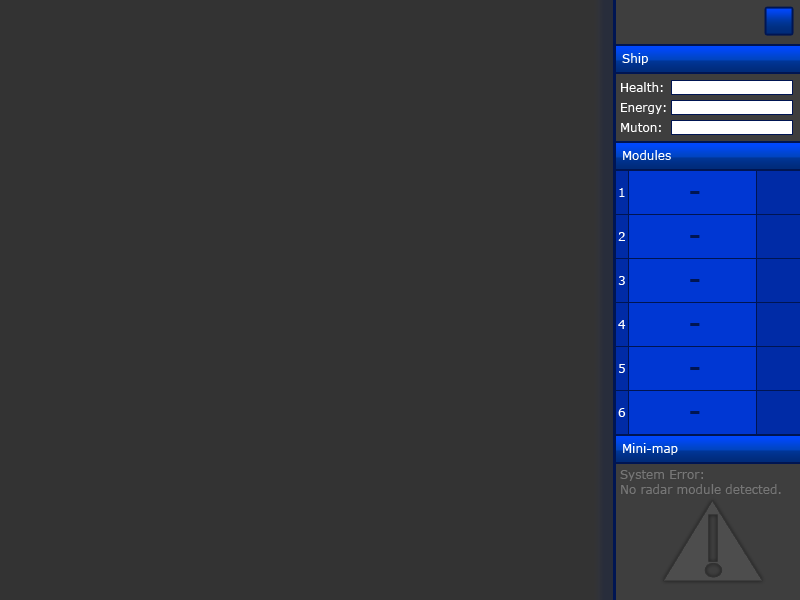
<style>
.page{position:relative;width:800px;height:600px;background:#333333}
.page>*{position:absolute;margin:0}
.t1{font:12px "Verdana";color:#ffffff}
.t2{font:30px "Verdana";color:#001552}
.t3{font:12px "Verdana";color:#767676}
</style>
<div class="page">
<p class="t1" style="left:622px;top:53px;width:26px;height:12px">Ship</p>
<p class="t1" style="left:621px;top:82px;width:42px;height:10px">Health:</p>
<p class="t1" style="left:621px;top:103px;width:45px;height:11px">Energy:</p>
<p class="t1" style="left:621px;top:123px;width:40px;height:9px">Muton:</p>
<p class="t1" style="left:623px;top:150px;width:48px;height:10px">Modules</p>
<p class="t1" style="left:619px;top:188px;width:6px;height:9px">1</p>
<p class="t2" style="left:690px;top:191px;width:10px;height:3px">-</p>
<p class="t1" style="left:618px;top:232px;width:7px;height:9px">2</p>
<p class="t2" style="left:690px;top:235px;width:10px;height:3px">-</p>
<p class="t1" style="left:618px;top:276px;width:7px;height:9px">3</p>
<p class="t2" style="left:690px;top:279px;width:10px;height:3px">-</p>
<p class="t1" style="left:618px;top:320px;width:8px;height:9px">4</p>
<p class="t2" style="left:690px;top:323px;width:10px;height:3px">-</p>
<p class="t1" style="left:619px;top:364px;width:6px;height:9px">5</p>
<p class="t2" style="left:690px;top:367px;width:10px;height:3px">-</p>
<p class="t1" style="left:618px;top:408px;width:8px;height:9px">6</p>
<p class="t2" style="left:690px;top:411px;width:10px;height:3px">-</p>
<p class="t1" style="left:623px;top:443px;width:55px;height:12px">Mini-map</p>
<p class="t3" style="left:620px;top:470px;width:161px;height:24px">System Error:<br>No radar module detected.</p>
</div>
